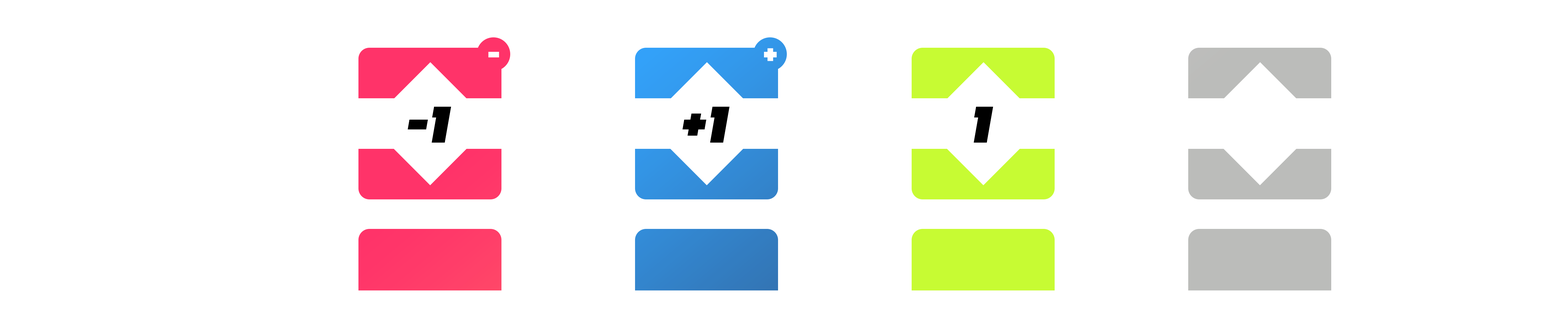
<style>
.page{position:relative;width:1568px;height:314px;background:#ffffff}
.page>*{position:absolute;margin:0}
.t1{font:31.4px "SoloistStraight";color:#ffffff}
.t2{font:54.9px "Soloist";color:#000000}
</style>
<div class="page">
<p class="t1" style="left:488px;top:52px;width:11px;height:5px">-</p>
<p class="t1" style="left:764px;top:48px;width:13px;height:13px">+</p>
<p class="t2" style="left:408px;top:106px;width:43px;height:37px">-1</p>
<p class="t2" style="left:682px;top:106px;width:48px;height:37px">+1</p>
<p class="t2" style="left:974px;top:106px;width:19px;height:37px">1</p>
</div>
